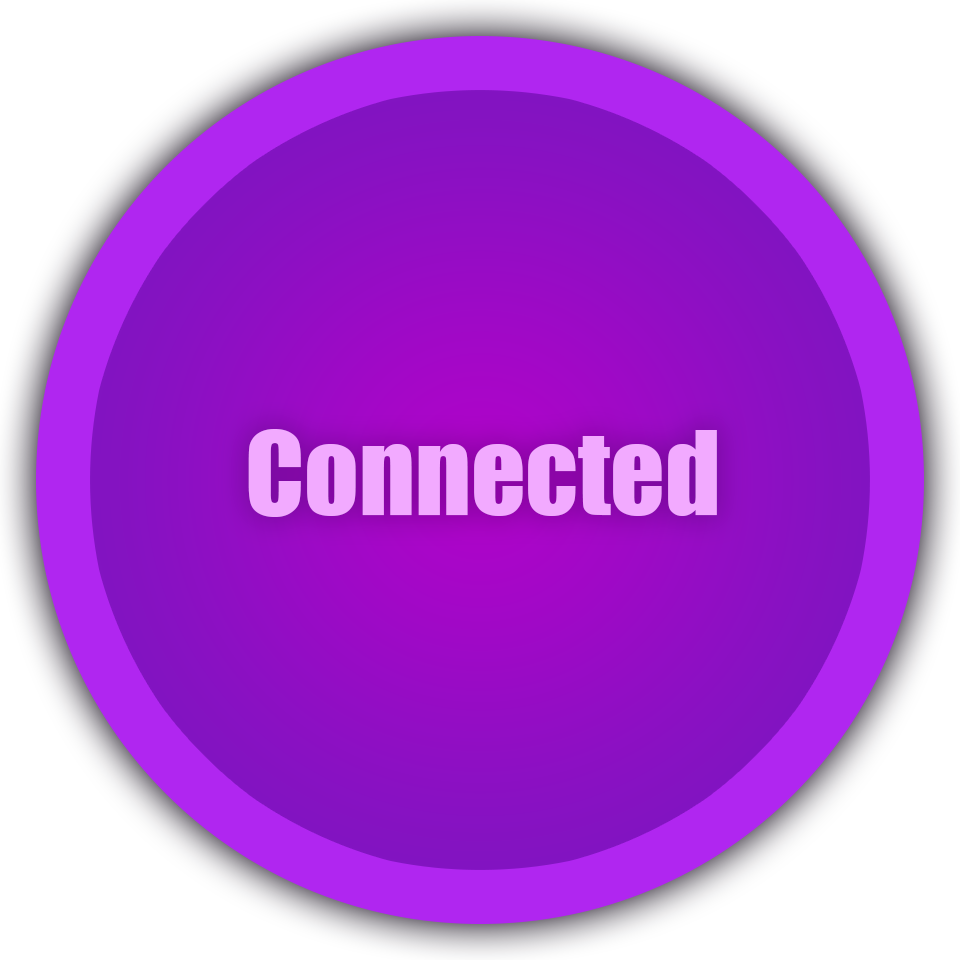
<style>
.page{position:relative;width:960px;height:960px}
.page>*{position:absolute;margin:0}
.t1{font:106.7px "Impact";color:#f2aaff}
</style>
<div class="page">
<p class="t1" style="left:248px;top:429px;width:469px;height:88px">Connected</p>
</div>
